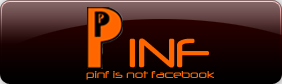
<style>
.page{position:relative;width:282px;height:84px}
.page>*{position:absolute;margin:0}
.t1{font:48px "Neuropol";color:#ff6600}
.t2{font:12px "Neuropol";color:#ff6600}
</style>
<div class="page">
<p class="t1" style="left:129px;top:38px;width:80px;height:30px">INF</p>
<p class="t2" style="left:86px;top:71px;width:128px;height:9px">pinf is not facebook</p>
</div>
